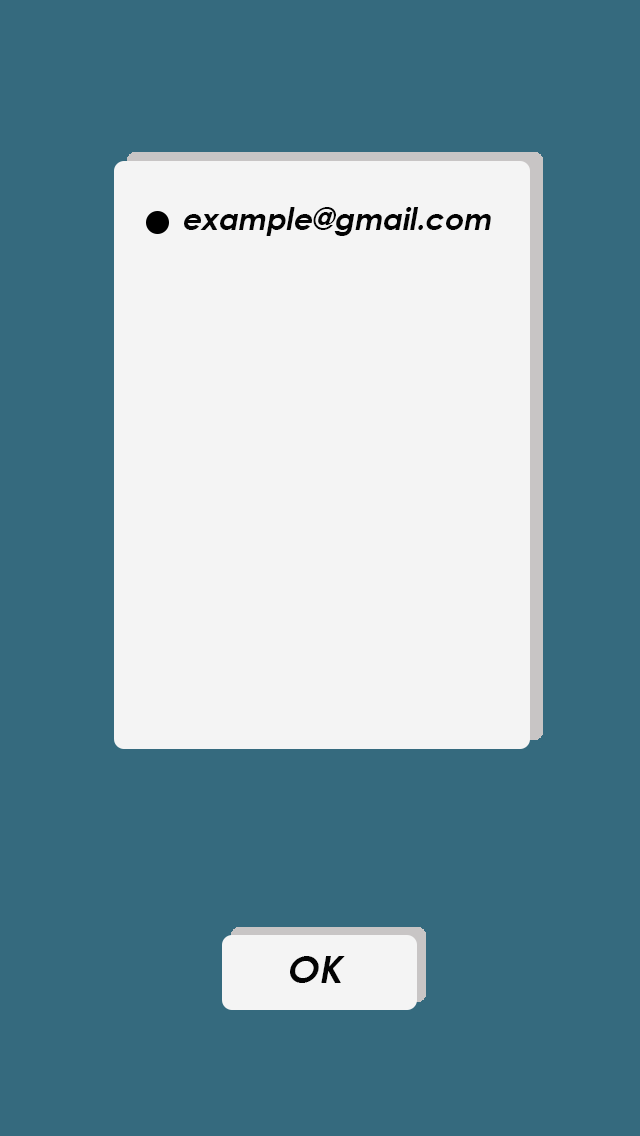
<style>
.page{position:relative;width:640px;height:1136px;background:#356a7e}
.page>*{position:absolute;margin:0}
.t1{font:30px "CenturyGothic-Bold";color:#030303;font-style:italic}
.t2{font:38.3px "CenturyGothic-Bold";color:#030303;font-style:italic}
</style>
<div class="page">
<p class="t1" style="left:184px;top:207px;width:307px;height:29px">example@gmail.com</p>
<p class="t2" style="left:290px;top:956px;width:55px;height:27px">OK</p>
</div>
